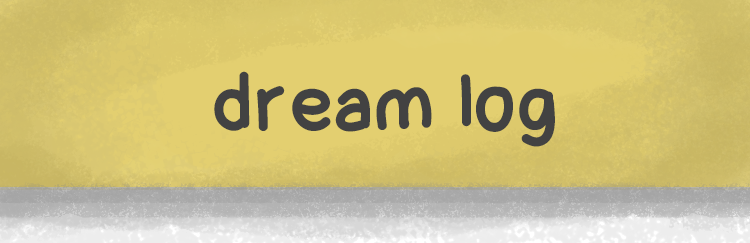
<style>
.page{position:relative;width:750px;height:243px}
.page>*{position:absolute;margin:0}
.t1{font:70px "Lettregaelle";color:#424242}
</style>
<div class="page">
<p class="t1" style="left:214px;top:71px;width:341px;height:76px">dream log</p>
</div>
